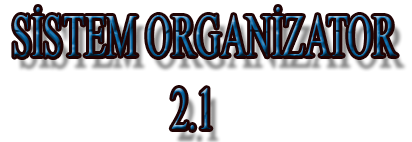
<style>
.page{position:relative;width:412px;height:142px;background:#ffffff}
.page>*{position:absolute;margin:0}
.t1{font:60.3px "TimesNewRomanPSMT";scale:0.58 1}
</style>
<div class="page">
<p class="t1" style="left:14px;top:7px;width:383px;height:123px">SİSTEM ORGANİZATOR <br>       2.1</p>
</div>
